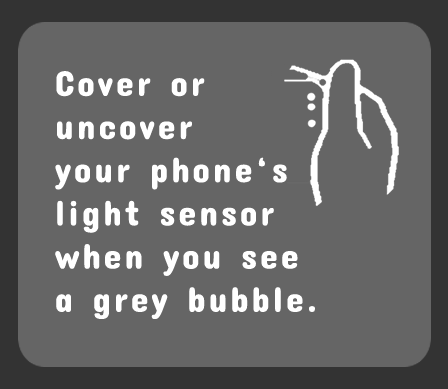
<style>
.page{position:relative;width:448px;height:389px;background:#656565}
.page>*{position:absolute;margin:0}
.t1{font:36px "ConcertOne-Regular";letter-spacing:0.08em;color:#ffffff}
</style>
<div class="page">
<p class="t1" style="left:55px;top:71px;width:260px;height:248px">Cover or <br>uncover <br>your phone‘s <br>light sensor <br>when you see <br>a grey bubble.</p>
</div>
